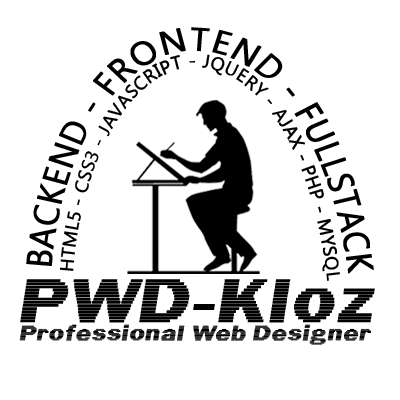
<style>
.page{position:relative;width:400px;height:400px;background:#ffffff}
.page>*{position:absolute;margin:0}
.t1{font:32.5px "Ebrima";color:#000000;font-weight:bold;scale:1.1 1}
.t2{font:66.5px "LinearBeam05";color:#000000;font-weight:bold}
.t3{font:22.5px "LinearBeam05";color:#000000;font-weight:bold}
</style>
<div class="page">
<p class="t1" style="left:26px;top:27px;width:348px;height:247px">BACKEND - FRONTEND - FULLSTACK</p>
<p class="t2" style="left:20px;top:279px;width:355px;height:44px">PWD-Kloz</p>
<p class="t3" style="left:19px;top:324px;width:353px;height:21px">Professional Web Designer</p>
</div>
